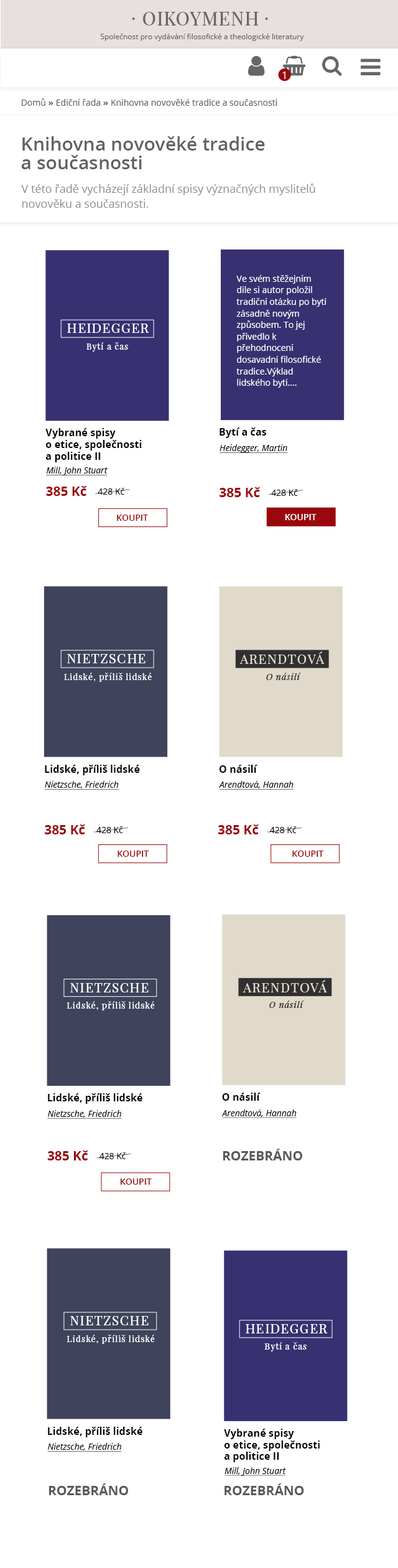
<style>
.page{position:relative;width:398px;height:1568px;background:#ffffff}
.page>*{position:absolute;margin:0}
.t1{font:18.7px "PlayfairDisplaySC-Regular";letter-spacing:0.04em;color:#666666}
.t2{font:18.7px "PlayfairDisplay-Regular";letter-spacing:0.04em;color:#666666}
.t3{font:7.5px "OpenSans";color:#666666}
.t4{font:10.8px "OpenSans";color:#ffffff}
.t5{font:8.7px "OpenSans";color:#616161}
.t6{font:8.7px "OpenSans-Bold";color:#616161}
.t7{font:18.7px/18.7px "OpenSans-Semibold";color:#616161}
.t8{font:11.2px/14.9px "OpenSans";color:#8e8e8e}
.t9{font:8.7px/11.6px "OpenSans";color:#ffffff}
.t10{font:13px "PlayfairDisplay-Regular";letter-spacing:0.075em;color:#ffffff;text-transform:uppercase}
.t11{font:8.7px "PlayfairDisplay-Regular";letter-spacing:0.075em;color:#ffffff}
.t12{font:10.1px/11.6px "OpenSans-Bold";color:#000000}
.t13{font:10.1px "OpenSans-Bold";color:#000000}
.t14{font:8.7px "OpenSans-Italic";color:#000000;text-decoration:underline}
.t15{font:13px "OpenSans-Bold";color:#9a080d}
.t16{font:8.7px "OpenSans";color:#000000}
.t17{font:8.7px "OpenSans-Semibold";color:#9a080d;text-transform:uppercase}
.t18{font:8.7px "OpenSans-Semibold";color:#ffffff;text-transform:uppercase}
.t19{font:13px "PlayfairDisplay-Regular";letter-spacing:0.075em;color:#e1dacb;text-transform:uppercase}
.t20{font:8.7px "PlayfairDisplay-Italic";letter-spacing:0.075em;color:#303030}
.t21{font:13px "OpenSans-Bold";color:#595959}
</style>
<div class="page">
<p class="t1" style="left:132px;top:17px;width:3px;height:3px">·</p>
<p class="t2" style="left:143px;top:12px;width:116px;height:14px">OIKOYMENH</p>
<p class="t1" style="left:265px;top:17px;width:3px;height:3px">·</p>
<p class="t3" style="left:100px;top:34px;width:204px;height:7px">Společnost pro vydávání filosofické a theologické literatury</p>
<p class="t4" style="left:282px;top:72px;width:4px;height:7px">1</p>
<p class="t5" style="left:22px;top:98px;width:256px;height:8px">Domů <span class="t6">»</span> Ediční řada <span class="t6">» </span>Knihovna novověké tradice a současnosti</p>
<p class="t7" style="left:21px;top:136px;width:244px;height:33px">Knihovna novověké tradice <br>a současnosti</p>
<p class="t8" style="left:21px;top:184px;width:294px;height:24px">V této řadě vycházejí základní spisy význačných myslitelů <br>novověku a současnosti.</p>
<p class="t9" style="left:236px;top:275px;width:91px;height:113px">Ve svém stěžejním díle si autor položil tradiční otázku po bytí zásadně novým způsobem. To jej přivedlo k přehodnocení dosavadní filosofické tradice.Výklad lidského bytí....</p>
<p class="t10" style="left:67px;top:324px;width:82px;height:9px">Heidegger</p>
<p class="t11" style="left:86px;top:342px;width:42px;height:10px">Bytí a čas</p>
<p class="t12" style="left:45px;top:428px;width:97px;height:34px">Vybrané spisy <br>o etice, společnosti <br>a politice II</p>
<p class="t13" style="left:220px;top:427px;width:47px;height:11px">Bytí a čas</p>
<p class="t14" style="left:219px;top:444px;width:69px;height:9px">Heidegger, Martin</p>
<p class="t14" style="left:46px;top:467px;width:62px;height:8px">Mill, John Stuart</p>
<p class="t15" style="left:46px;top:486px;width:41px;height:10px">385 Kč</p>
<p class="t16" style="left:98px;top:488px;width:26px;height:7px">428 Kč</p>
<p class="t15" style="left:220px;top:487px;width:41px;height:10px">385 Kč</p>
<p class="t16" style="left:271px;top:489px;width:27px;height:7px">428 Kč</p>
<p class="t17" style="left:117px;top:515px;width:31px;height:6px">koupit</p>
<p class="t18" style="left:285px;top:514px;width:32px;height:6px">koupit</p>
<p class="t10" style="left:67px;top:654px;width:79px;height:9px">Nietzsche</p>
<p class="t19" style="left:240px;top:651px;width:85px;height:13px">Arendtová</p>
<p class="t11" style="left:64px;top:673px;width:88px;height:9px">Lidské, příliš lidské</p>
<p class="t20" style="left:266px;top:673px;width:35px;height:7px">O násilí</p>
<p class="t13" style="left:45px;top:765px;width:95px;height:10px">Lidské, příliš lidské</p>
<p class="t13" style="left:220px;top:765px;width:38px;height:8px">O násilí</p>
<p class="t14" style="left:44px;top:781px;width:75px;height:9px">Nietzsche, Friedrich</p>
<p class="t14" style="left:219px;top:781px;width:75px;height:9px">Arendtová, Hannah</p>
<p class="t15" style="left:45px;top:824px;width:41px;height:10px">385 Kč</p>
<p class="t16" style="left:96px;top:826px;width:27px;height:7px">428 Kč</p>
<p class="t15" style="left:218px;top:824px;width:41px;height:10px">385 Kč</p>
<p class="t16" style="left:269px;top:826px;width:28px;height:7px">428 Kč</p>
<p class="t17" style="left:118px;top:851px;width:31px;height:6px">koupit</p>
<p class="t17" style="left:292px;top:851px;width:32px;height:6px">koupit</p>
<p class="t10" style="left:70px;top:983px;width:79px;height:9px">Nietzsche</p>
<p class="t19" style="left:243px;top:980px;width:84px;height:12px">Arendtová</p>
<p class="t11" style="left:67px;top:1001px;width:88px;height:9px">Lidské, příliš lidské</p>
<p class="t20" style="left:269px;top:1001px;width:35px;height:7px">O násilí</p>
<p class="t13" style="left:48px;top:1093px;width:94px;height:11px">Lidské, příliš lidské</p>
<p class="t13" style="left:222px;top:1093px;width:39px;height:8px">O násilí</p>
<p class="t14" style="left:222px;top:1109px;width:75px;height:9px">Arendtová, Hannah</p>
<p class="t14" style="left:47px;top:1110px;width:75px;height:9px">Nietzsche, Friedrich</p>
<p class="t15" style="left:47px;top:1150px;width:41px;height:10px">385 Kč</p>
<p class="t16" style="left:99px;top:1152px;width:27px;height:7px">428 Kč</p>
<p class="t21" style="left:223px;top:1149px;width:79px;height:11px">ROZEBRÁNO</p>
<p class="t17" style="left:120px;top:1178px;width:32px;height:7px">koupit</p>
<p class="t10" style="left:70px;top:1316px;width:79px;height:9px">Nietzsche</p>
<p class="t10" style="left:246px;top:1324px;width:82px;height:9px">Heidegger</p>
<p class="t11" style="left:67px;top:1335px;width:88px;height:9px">Lidské, příliš lidské</p>
<p class="t11" style="left:264px;top:1342px;width:43px;height:9px">Bytí a čas</p>
<p class="t13" style="left:48px;top:1427px;width:94px;height:10px">Lidské, příliš lidské</p>
<p class="t12" style="left:224px;top:1429px;width:96px;height:33px">Vybrané spisy <br>o etice, společnosti <br>a politice II</p>
<p class="t14" style="left:47px;top:1443px;width:75px;height:9px">Nietzsche, Friedrich</p>
<p class="t14" style="left:225px;top:1467px;width:61px;height:9px">Mill, John Stuart</p>
<p class="t21" style="left:49px;top:1483px;width:79px;height:12px">ROZEBRÁNO</p>
<p class="t21" style="left:225px;top:1483px;width:79px;height:12px">ROZEBRÁNO</p>
</div>
